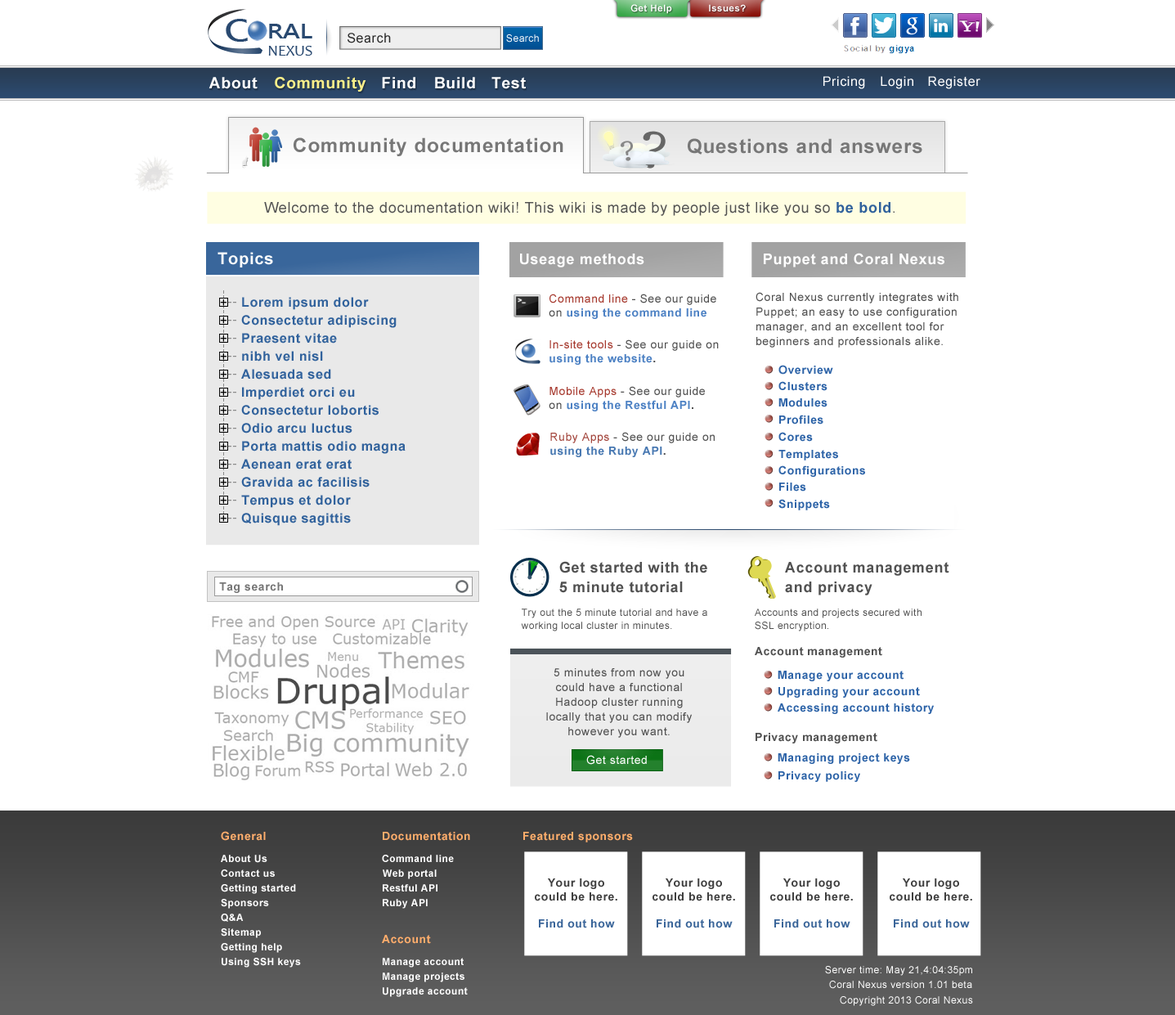
<style>
.page{position:relative;width:1175px;height:1015px;background:#ffffff}
.page>*{position:absolute;margin:0}
.t1{font:9.4px "Arial-BoldMT";letter-spacing:0.04em;color:#ffffff}
.t2{font:29.5px "MicrosoftJhengHeiBold";letter-spacing:-0.02em;color:#294970;scale:1.24 1}
.t3{font:19.6px "MicrosoftJhengHeiBold";letter-spacing:-0.02em;color:#294970;scale:1.24 1}
.t4{font:13.1px "ArialMT";letter-spacing:0.04em;color:#2b2b2b}
.t5{font:9.8px "ArialMT";letter-spacing:0.04em;color:#ffffff}
.t6{font:15.3px "Candara";color:#294970}
.t7{font:15.8px "Arial-BoldMT";letter-spacing:0.04em;color:#ffffff}
.t8{font:15.8px "Arial-BoldMT";letter-spacing:0.04em;color:#fcf08a}
.t9{font:13.1px "ArialMT";letter-spacing:0.04em;color:#ffffff}
.t10{font:19.6px "Arial-BoldMT";letter-spacing:0.04em;color:#777777}
.t11{font:14.7px "ArialMT";letter-spacing:0.04em;color:#515151}
.t12{font:14.7px "Arial-BoldMT";letter-spacing:0.04em;color:#30619c}
.t13{font:16.4px "Arial-BoldMT";letter-spacing:0.04em;color:#ffffff}
.t14{font:14.7px "Arial-BoldMT";letter-spacing:0.04em;color:#ffffff}
.t15{font:11.4px "Arial-BoldMT";letter-spacing:0.04em;color:#4e82c4}
.t16{font:11.4px "ArialMT";letter-spacing:0.04em;color:#a6392e}
.t17{font:11.4px "ArialMT";letter-spacing:0.04em;color:#515151}
.t18{font:11.4px "Arial-BoldMT";letter-spacing:0.04em;color:#515151}
.t19{font:11.4px/14.7px "ArialMT";letter-spacing:0.04em;color:#515151}
.t20{font:12.4px "ArialMT";letter-spacing:0.04em;color:#010101}
.t21{font:13.1px/18px "Arial-BoldMT";letter-spacing:0.04em;color:#31629c}
.t22{font:11.4px "Arial-BoldMT";letter-spacing:0.04em;color:#2e64a8}
.t23{font:11.4px "ArialMT";letter-spacing:0.04em;color:#a3463d}
.t24{font:11.4px "Arial-BoldMT";letter-spacing:0.04em;color:#4979b2}
.t25{font:14.7px/19.6px "Arial-BoldMT";letter-spacing:0.04em;color:#515151}
.t26{font:11.4px "Arial-BoldMT";letter-spacing:0.04em;color:#777777}
.t27{font:9.8px/13.1px "ArialMT";letter-spacing:0.04em;color:#515151}
.t28{font:11.4px "ArialMT";letter-spacing:0.04em;color:#ffffff}
.t29{font:11.4px "Arial-BoldMT";letter-spacing:0.04em;color:#ffad6c}
.t30{font:11.4px "Arial-BoldMT";letter-spacing:0.04em;color:#ffad6b}
.t31{font:9.8px "Arial-BoldMT";letter-spacing:0.04em;color:#ffffff}
.t32{font:11.4px "Arial-BoldMT";letter-spacing:0.04em;color:#404040}
.t33{font:11.4px "Arial-BoldMT";letter-spacing:0.04em;color:#3a6599}
</style>
<div class="page">
<p class="t1" style="left:630px;top:4px;width:42px;height:10px">Get Help</p>
<p class="t1" style="left:709px;top:4px;width:37px;height:7px">Issues?</p>
<p class="t2" style="left:226px;top:19px;width:22px;height:23px">C</p>
<p class="t3" style="left:269px;top:24px;width:43px;height:14px">RAL</p>
<p class="t4" style="left:348px;top:33px;width:43px;height:10px">Search</p>
<p class="t5" style="left:506px;top:34px;width:33px;height:9px">Search</p>
<p class="t6" style="left:268px;top:46px;width:44px;height:10px">NEXUS</p>
<p class="t7" style="left:209px;top:77px;width:49px;height:12px">About</p>
<p class="t8" style="left:275px;top:77px;width:91px;height:15px">Community</p>
<p class="t7" style="left:382px;top:77px;width:33px;height:12px">Find</p>
<p class="t7" style="left:435px;top:77px;width:40px;height:12px">Build</p>
<p class="t7" style="left:491px;top:77px;width:35px;height:12px">Test</p>
<p class="t9" style="left:823px;top:76px;width:42px;height:13px">Pricing</p>
<p class="t9" style="left:881px;top:76px;width:32px;height:13px">Login</p>
<p class="t9" style="left:928px;top:76px;width:52px;height:13px">Register</p>
<p class="t10" style="left:294px;top:137px;width:269px;height:19px">Community documentation</p>
<p class="t10" style="left:688px;top:138px;width:234px;height:17px">Questions and answers</p>
<p class="t11" style="left:264px;top:202px;width:631px;height:14px">Welcome to the documentation wiki! This wiki is made by people just like you so <span class="t12">be bold</span>.</p>
<p class="t13" style="left:218px;top:252px;width:55px;height:15px">Topics</p>
<p class="t14" style="left:520px;top:253px;width:124px;height:14px">Useage methods</p>
<p class="t14" style="left:764px;top:253px;width:180px;height:14px">Puppet and Coral Nexus</p>
<p class="t15" style="left:549px;top:294px;width:167px;height:25px"><span class="t16">Command line </span><span class="t17">- See our guide on </span>using the command line tools<span class="t18">.</span></p>
<p class="t19" style="left:756px;top:292px;width:202px;height:56px">Coral Nexus currently integrates with Puppet; an easy to use configuration manager, and an excellent tool for beginners and professionals alike.</p>
<p class="t20" style="left:220px;top:299px;width:7px;height:7px">+</p>
<p class="t21" style="left:241px;top:297px;width:165px;height:229px">Lorem ipsum dolor<br>Consectetur adipiscing Praesent vitae <br>nibh vel nisl<br>Alesuada sed<br>Imperdiet orci eu Consectetur lobortis<br>Odio arcu luctus<br>Porta mattis odio magna  Aenean erat erat<br>Gravida ac facilisis<br>Tempus et dolor<br>Quisque sagittis</p>
<p class="t20" style="left:220px;top:317px;width:7px;height:7px">+</p>
<p class="t20" style="left:220px;top:335px;width:7px;height:7px">+</p>
<p class="t17" style="left:550px;top:339px;width:169px;height:26px"><span class="t16">In-site tools </span>- See our guide on <span class="t15">using the website</span><span class="t18">.</span></p>
<p class="t20" style="left:220px;top:353px;width:7px;height:7px">+</p>
<p class="t22" style="left:778px;top:365px;width:55px;height:10px">Overview</p>
<p class="t20" style="left:220px;top:371px;width:7px;height:7px">+</p>
<p class="t20" style="left:220px;top:389px;width:7px;height:7px">+</p>
<p class="t15" style="left:549px;top:386px;width:156px;height:25px"><span class="t16">Mobile Apps </span><span class="t17">- See our guide on </span>using the Restful API<span class="t18">.</span></p>
<p class="t22" style="left:778px;top:381px;width:50px;height:10px">Clusters</p>
<p class="t22" style="left:778px;top:398px;width:50px;height:9px">Modules</p>
<p class="t20" style="left:220px;top:407px;width:7px;height:7px">+</p>
<p class="t20" style="left:220px;top:425px;width:7px;height:7px">+</p>
<p class="t22" style="left:779px;top:415px;width:44px;height:9px">Profiles</p>
<p class="t17" style="left:550px;top:432px;width:165px;height:25px"><span class="t23">Ruby Apps </span>- See our guide on <span class="t24">using the Ruby API</span><span class="t18">.</span></p>
<p class="t22" style="left:778px;top:432px;width:35px;height:10px">Cores</p>
<p class="t20" style="left:220px;top:443px;width:7px;height:7px">+</p>
<p class="t22" style="left:778px;top:450px;width:60px;height:10px">Templates</p>
<p class="t20" style="left:220px;top:461px;width:7px;height:7px">+</p>
<p class="t22" style="left:778px;top:465px;width:87px;height:12px">Configurations</p>
<p class="t20" style="left:220px;top:479px;width:7px;height:7px">+</p>
<p class="t22" style="left:779px;top:482px;width:27px;height:9px">Files</p>
<p class="t20" style="left:220px;top:497px;width:7px;height:7px">+</p>
<p class="t22" style="left:778px;top:499px;width:52px;height:11px">Snippets</p>
<p class="t20" style="left:220px;top:515px;width:7px;height:7px">+</p>
<p class="t25" style="left:559px;top:561px;width:148px;height:32px">Get started with the  5 minute tutorial</p>
<p class="t25" style="left:785px;top:562px;width:164px;height:33px">Account management and privacy</p>
<p class="t26" style="left:219px;top:582px;width:64px;height:11px">Tag search</p>
<p class="t27" style="left:521px;top:608px;width:186px;height:23px">Try out the 5 minute tutorial and have a working local cluster in minutes.</p>
<p class="t27" style="left:755px;top:608px;width:167px;height:23px">Accounts and projects secured with SSL encryption.</p>
<p class="t18" style="left:755px;top:647px;width:127px;height:10px">Account management</p>
<p class="t19" style="left:546px;top:668px;width:146px;height:70px;text-align:center">5 minutes from now you could have a functional Hadoop cluster running locally that you can modify however you want.</p>
<p class="t22" style="left:778px;top:671px;width:126px;height:10px">Manage your account</p>
<p class="t22" style="left:778px;top:687px;width:142px;height:11px">Upgrading your account</p>
<p class="t22" style="left:778px;top:703px;width:156px;height:11px">Accessing account history</p>
<p class="t18" style="left:756px;top:733px;width:121px;height:10px">Privacy management</p>
<p class="t28" style="left:586px;top:755px;width:61px;height:10px">Get started</p>
<p class="t22" style="left:778px;top:753px;width:132px;height:11px">Managing project keys</p>
<p class="t22" style="left:778px;top:771px;width:82px;height:11px">Privacy policy</p>
<p class="t29" style="left:221px;top:831px;width:45px;height:10px">General</p>
<p class="t30" style="left:383px;top:832px;width:87px;height:9px">Documentation</p>
<p class="t30" style="left:523px;top:832px;width:110px;height:10px">Featured sponsors</p>
<p class="t31" style="left:221px;top:855px;width:46px;height:8px">About Us</p>
<p class="t31" style="left:382px;top:855px;width:72px;height:7px">Command line</p>
<p class="t31" style="left:221px;top:869px;width:54px;height:8px">Contact us</p>
<p class="t31" style="left:383px;top:869px;width:54px;height:10px">Web portal</p>
<p class="t32" style="left:535px;top:878px;width:82px;height:50px;text-align:center">Your logo could be here.<br><br><span class="t33">Find out how</span></p>
<p class="t32" style="left:653px;top:878px;width:82px;height:50px;text-align:center">Your logo could be here.<br><br><span class="t33">Find out how</span></p>
<p class="t32" style="left:770px;top:878px;width:83px;height:50px;text-align:center">Your logo could be here.<br><br><span class="t33">Find out how</span></p>
<p class="t32" style="left:890px;top:878px;width:82px;height:50px;text-align:center">Your logo could be here.<br><br><span class="t33">Find out how</span></p>
<p class="t31" style="left:221px;top:884px;width:75px;height:10px">Getting started</p>
<p class="t31" style="left:383px;top:884px;width:54px;height:7px">Restful API</p>
<p class="t31" style="left:221px;top:899px;width:48px;height:9px">Sponsors</p>
<p class="t31" style="left:383px;top:899px;width:45px;height:9px">Ruby API</p>
<p class="t31" style="left:221px;top:913px;width:23px;height:9px">Q&amp;A</p>
<p class="t31" style="left:221px;top:928px;width:40px;height:10px">Sitemap</p>
<p class="t30" style="left:382px;top:935px;width:49px;height:9px">Account</p>
<p class="t31" style="left:221px;top:943px;width:61px;height:10px">Getting help</p>
<p class="t31" style="left:222px;top:958px;width:79px;height:9px">Using SSH keys</p>
<p class="t31" style="left:383px;top:958px;width:81px;height:9px">Manage account</p>
<p class="t5" style="left:825px;top:966px;width:147px;height:10px">Server time: May 21,4:04:35pm</p>
<p class="t31" style="left:383px;top:972px;width:81px;height:10px">Manage projects</p>
<p class="t31" style="left:383px;top:987px;width:85px;height:10px">Upgrade account</p>
<p class="t5" style="left:829px;top:980px;width:143px;height:9px">Coral Nexus version 1.01 beta</p>
<p class="t5" style="left:840px;top:996px;width:133px;height:10px">Copyright 2013 Coral Nexus</p>
</div>
